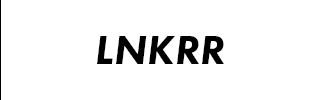
<style>
.page{position:relative;width:320px;height:100px;background:#ffffff}
.page>*{position:absolute;margin:0}
.t1{font:41.7px "FuturaPT-HeavyObl";color:#000000}
</style>
<div class="page">
<p class="t1" style="left:97px;top:36px;width:127px;height:28px">LNKRR</p>
</div>
